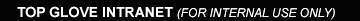
<style>
.page{position:relative;width:360px;height:21px;background:#040404}
.page>*{position:absolute;margin:0}
.t1{font:12px "Arial-ItalicMT";color:#ffffff}
.t2{font:14px "Arial-BoldMT";color:#ffffff}
</style>
<div class="page">
<p class="t1" style="left:17px;top:6px;width:318px;height:14px"><span class="t2">TOP GLOVE INTRANET </span>(FOR INTERNAL USE ONLY)</p>
</div>
